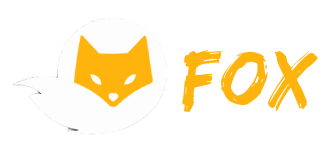
<style>
.page{position:relative;width:332px;height:148px;background:#ffffff}
.page>*{position:absolute;margin:0}
.t1{font:80px "Edo";color:#ffb30d}
</style>
<div class="page">
<p class="t1" style="left:182px;top:49px;width:136px;height:64px">FOX</p>
</div>
